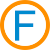
<style>
.page{position:relative;width:50px;height:50px;background:#ffffff}
.page>*{position:absolute;margin:0}
.t1{font:41.7px "ArialMT";color:#008acf}
</style>
<div class="page">
<p class="t1" style="left:15px;top:10px;width:21px;height:31px">F</p>
</div>
